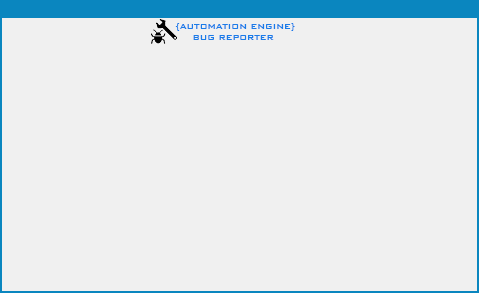
<style>
.page{position:relative;width:479px;height:293px;background:#f0f0f0}
.page>*{position:absolute;margin:0}
.t1{font:9px "BankGothicBT-Medium";color:#1a7ce9}
</style>
<div class="page">
<p class="t1" style="left:175px;top:23px;width:120px;height:17px">{AUTOMATION ENGINE}<br>     BUG REPORTER</p>
</div>
